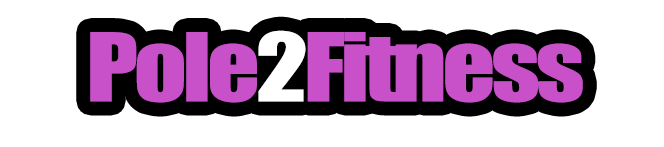
<style>
.page{position:relative;width:664px;height:147px;background:#ffffff}
.page>*{position:absolute;margin:0}
.t1{font:87.4px "Impact";letter-spacing:-0.04em;color:#c851ca;scale:1.19 1}
.t2{font:87.4px "Impact";letter-spacing:-0.04em;color:#ffffff;scale:1.19 1}
</style>
<div class="page">
<p class="t1" style="left:90px;top:30px;width:493px;height:73px">Pole<span class="t2">2</span>Fitness</p>
</div>
